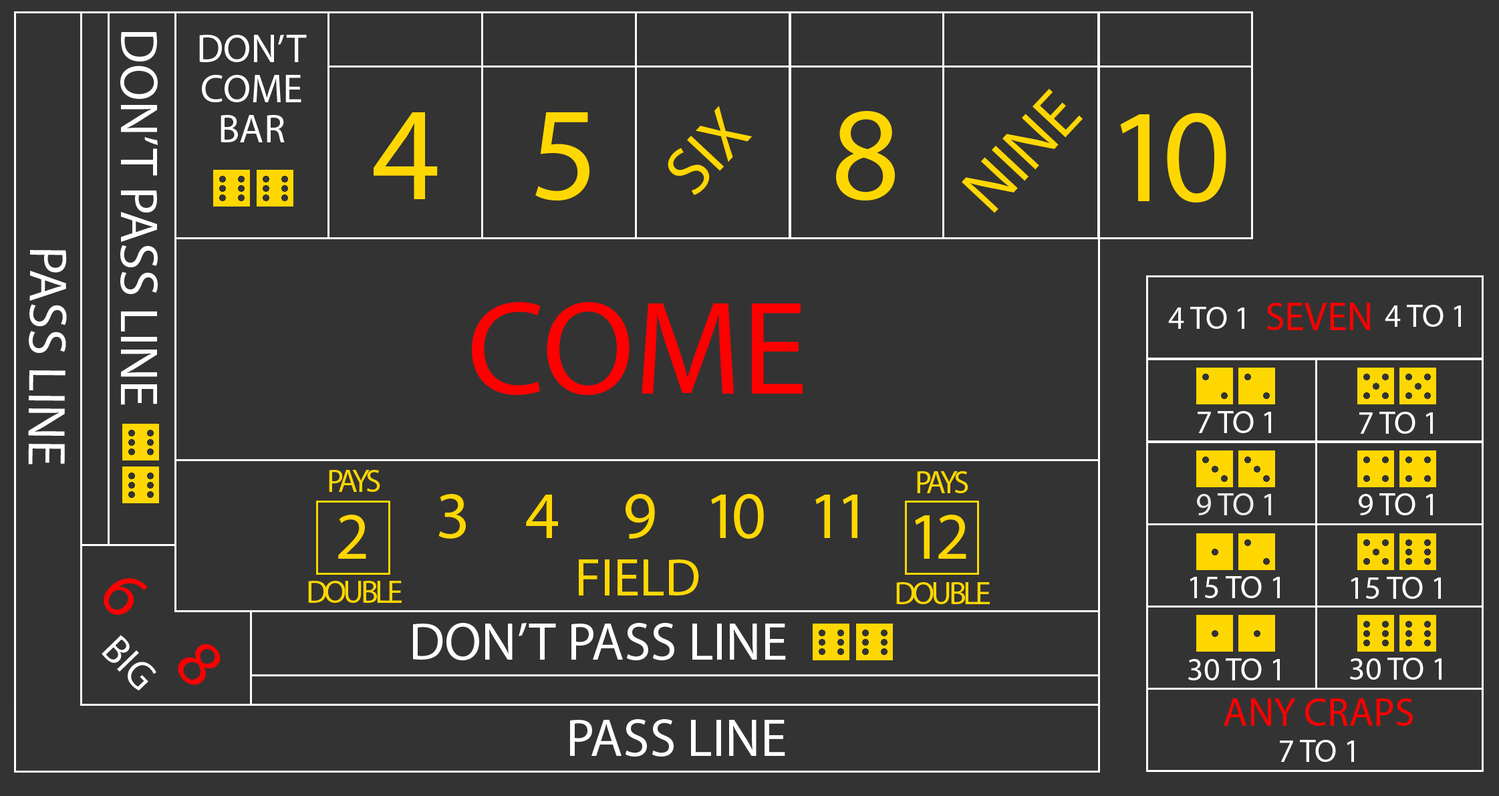
<style>
.page{position:relative;width:1499px;height:796px;background:#333333}
.page>*{position:absolute;margin:0}
.t1{font:53.4px "MyriadPro-Regular";color:#ffffff}
.t2{font:40.1px/40.1px "MyriadPro-Regular";color:#ffffff}
.t3{font:66.8px "MyriadPro-Regular";color:#ffd700}
.t4{font:133.6px "MyriadPro-Regular";color:#ffd700}
.t5{font:133.6px "MyriadPro-Regular";letter-spacing:-0.1em;color:#ffd700}
.t6{font:133.6px "MyriadPro-Regular";color:#ff0000}
.t7{font:40.1px "MyriadPro-Regular";color:#ff0000}
.t8{font:32.1px "MyriadPro-Regular";color:#ffffff}
.t9{font:32.1px "MyriadPro-Regular";letter-spacing:-0.1em;color:#ffd700}
.t10{font:66.8px "MyriadPro-Regular";letter-spacing:-0.1em;color:#ffd700}
.t11{font:53.4px "MyriadPro-Regular";color:#ffd700}
.t12{font:66.8px "MyriadPro-Regular";color:#ff0000}
.t13{font:40.1px "MyriadPro-Regular";color:#ffffff}
</style>
<div class="page">
<p class="t1" style="left:120px;top:32px;width:38px;height:373px;rotate:90deg">DON’T PASS LINE</p>
<p class="t2" style="left:199px;top:35px;width:108px;height:107px;text-align:center">DON’T COME BAR</p>
<p class="t3" style="left:961px;top:88px;width:121px;height:125px;rotate:-47deg">NINE</p>
<p class="t4" style="left:373px;top:112px;width:65px;height:87px">4</p>
<p class="t4" style="left:535px;top:112px;width:54px;height:88px">5</p>
<p class="t3" style="left:667px;top:106px;width:85px;height:89px;rotate:-47deg">SIX</p>
<p class="t4" style="left:836px;top:111px;width:59px;height:89px">8</p>
<p class="t5" style="left:1120px;top:113px;width:106px;height:89px">10</p>
<p class="t1" style="left:28px;top:250px;width:39px;height:214px;rotate:91deg">PASS LINE</p>
<p class="t6" style="left:472px;top:301px;width:330px;height:94px">COME</p>
<p class="t7" style="left:1267px;top:303px;width:103px;height:27px">SEVEN</p>
<p class="t8" style="left:1384px;top:305px;width:76px;height:22px">4 TO 1</p>
<p class="t8" style="left:1168px;top:307px;width:76px;height:22px">4 TO 1</p>
<p class="t8" style="left:1197px;top:411px;width:74px;height:22px">7 TO 1</p>
<p class="t8" style="left:1359px;top:412px;width:73px;height:22px">7 TO 1</p>
<p class="t9" style="left:329px;top:470px;width:51px;height:22px">PAYS</p>
<p class="t9" style="left:917px;top:471px;width:51px;height:22px">PAYS</p>
<p class="t10" style="left:438px;top:494px;width:28px;height:44px">3</p>
<p class="t10" style="left:526px;top:494px;width:32px;height:44px">4</p>
<p class="t10" style="left:625px;top:494px;width:30px;height:44px">9</p>
<p class="t10" style="left:711px;top:494px;width:53px;height:44px">10</p>
<p class="t10" style="left:815px;top:494px;width:42px;height:44px">11</p>
<p class="t8" style="left:1197px;top:493px;width:74px;height:22px;opacity:0.9">9 TO 1</p>
<p class="t8" style="left:1358px;top:493px;width:74px;height:22px">9 TO 1</p>
<p class="t10" style="left:338px;top:514px;width:28px;height:45px">2</p>
<p class="t10" style="left:915px;top:514px;width:51px;height:45px">12</p>
<p class="t11" style="left:579px;top:559px;width:120px;height:36px">FIELD</p>
<p class="t12" style="left:104px;top:578px;width:44px;height:37px;rotate:47deg">6</p>
<p class="t9" style="left:308px;top:581px;width:94px;height:22px">DOUBLE</p>
<p class="t9" style="left:896px;top:582px;width:93px;height:22px">DOUBLE</p>
<p class="t8" style="left:1189px;top:576px;width:90px;height:22px">15 TO 1</p>
<p class="t8" style="left:1350px;top:577px;width:90px;height:22px">15 TO 1</p>
<p class="t1" style="left:413px;top:623px;width:373px;height:37px">DON’T PASS LINE</p>
<p class="t13" style="left:102px;top:635px;width:54px;height:55px;rotate:46deg">BIG</p>
<p class="t12" style="left:178px;top:643px;width:42px;height:42px;rotate:47deg">8</p>
<p class="t8" style="left:1188px;top:658px;width:91px;height:22px">30 TO 1</p>
<p class="t8" style="left:1350px;top:657px;width:91px;height:22px">30 TO 1</p>
<p class="t7" style="left:1223px;top:698px;width:189px;height:28px">ANY CRAPS</p>
<p class="t1" style="left:570px;top:719px;width:215px;height:37px">PASS LINE</p>
<p class="t8" style="left:1279px;top:740px;width:75px;height:22px">7 TO 1</p>
</div>
